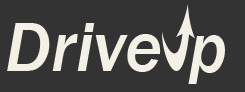
<style>
.page{position:relative;width:245px;height:92px;background:#333333}
.page>*{position:absolute;margin:0}
.t1{font:72px "FranklinGothic-MediumItalic";color:#f4f0e6}
</style>
<div class="page">
<p class="t1" style="left:7px;top:23px;width:154px;height:49px">Drive</p>
<p class="t1" style="left:188px;top:35px;width:37px;height:49px">p</p>
</div>
